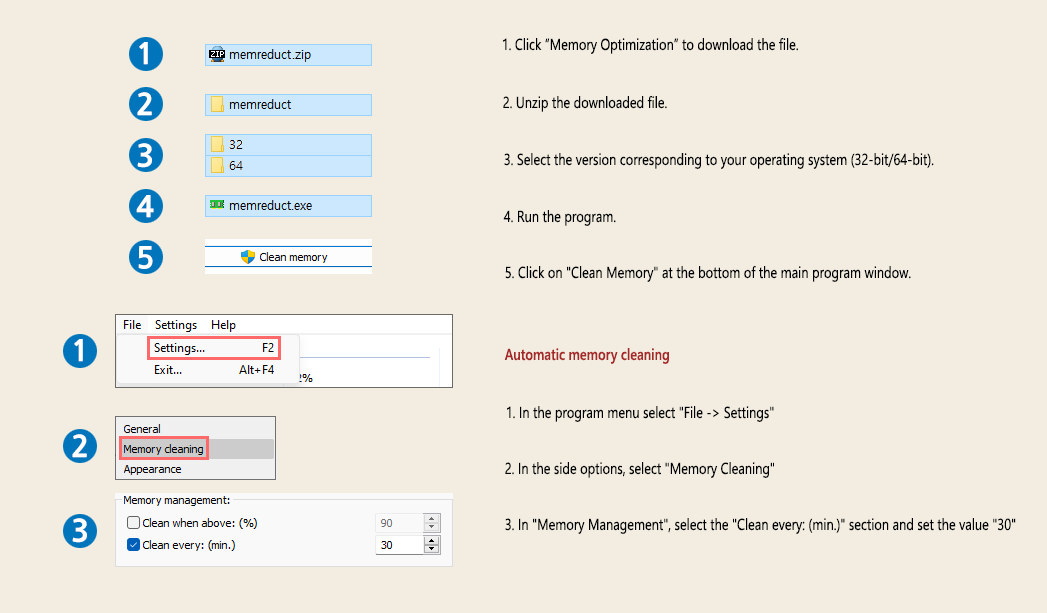
<style>
.page{position:relative;width:1047px;height:613px;background:#f2ede0}
.page>*{position:absolute;margin:0}
.t1{font:16px "SegoeUI";color:#000000;scale:0.8 1}
.t2{font:16px "SegoeUI-Semibold";color:#a72828;scale:0.8 1}
</style>
<div class="page">
<p class="t1" style="left:503px;top:37px;width:295px;height:17px">1. Click “Memory Optimization” to download the file.</p>
<p class="t1" style="left:503px;top:95px;width:164px;height:17px">2. Unzip the downloaded file.</p>
<p class="t1" style="left:504px;top:153px;width:430px;height:16px">3. Select the version corresponding to your operating system (32-bit/64-bit).</p>
<p class="t1" style="left:503px;top:210px;width:113px;height:16px">4. Run the program.</p>
<p class="t1" style="left:505px;top:265px;width:406px;height:17px">5. Click on "Clean Memory" at the bottom of the main program window.</p>
<p class="t2" style="left:504px;top:348px;width:165px;height:16px">Automatic memory cleaning</p>
<p class="t1" style="left:507px;top:406px;width:267px;height:16px">1. In the program menu select "File -&gt; Settings"</p>
<p class="t1" style="left:505px;top:462px;width:269px;height:16px">2. In the side options, select "Memory Cleaning"</p>
<p class="t1" style="left:505px;top:518px;width:511px;height:16px">3. In "Memory Management", select the "Clean every: (min.)" section and set the value "30"</p>
</div>
